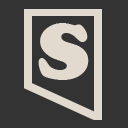
<style>
.page{position:relative;width:128px;height:128px;background:#333333}
.page>*{position:absolute;margin:0}
.t1{font:82px "CooperBlack";color:#e3dacf}
</style>
<div class="page">
<p class="t1" style="left:38px;top:23px;width:51px;height:57px">S</p>
</div>
